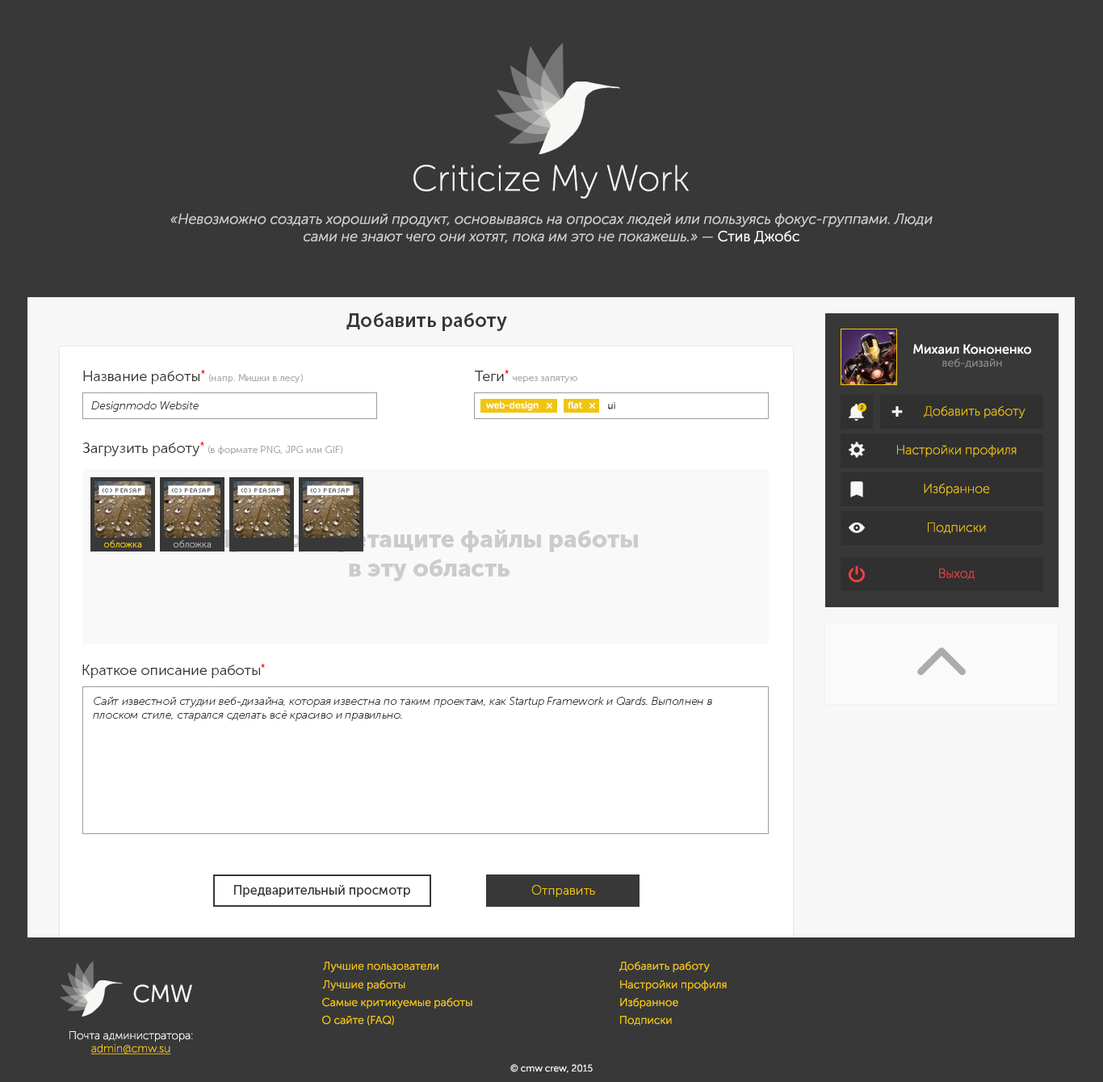
<style>
.page{position:relative;width:1103px;height:1082px;background:#383838}
.page>*{position:absolute;margin:0}
.t1{font:36.3px "MuseoSansCyrl-100";color:#f7f7f5}
.t2{font:14.5px "MuseoSansCyrl-300Italic";color:#cfcfcc}
.t3{font:14.5px "MuseoSansCyrl-300";color:#cfcfcc}
.t4{font:14.5px "MuseoSansCyrl-300";color:#ffffff}
.t5{font:19.4px "MuseoSansCyrl-700";color:#383838}
.t6{font:12.9px "MuseoSansCyrl-500";color:#ffffff}
.t7{font:11.3px "MuseoSansCyrl-300";color:#878787}
.t8{font:9.7px "MuseoSansCyrl-300";color:#adadad}
.t9{font:14.5px "MuseoSansCyrl-300";color:#383838}
.t10{font:14.5px "MuseoSansCyrl-300";color:#ff0000}
.t11{font:11.3px "MuseoSansCyrl-100Italic";color:#383838}
.t12{font:9.7px "MuseoSansCyrl-500";color:#ffffff}
.t13{font:9.7px "MuseoSansCyrl-500";color:#383838}
.t14{font:5.6px "MuseoSansCyrl-500";color:#383838}
.t15{font:17.8px "MuseoSansCyrl-900";color:#f7f7f7}
.t16{font:12.9px "MuseoSansCyrl-100";color:#f1c40f}
.t17{font:24.2px "MuseoSansCyrl-900";color:#cccccc}
.t18{font:9.7px "MuseoSansCyrl-100";color:#f1c40f}
.t19{font:9.7px "MuseoSansCyrl-100";color:#aaaaaa}
.t20{font:12.9px "MuseoSansCyrl-100";color:#ff4040}
.t21{font:12.9px "MuseoSansCyrl-500";color:#383838}
.t22{font:11.3px "MuseoSansCyrl-300";color:#f1c40f}
.t23{font:24.2px "MuseoSansCyrl-300";color:#f7f7f5}
.t24{font:11.3px "MuseoSansCyrl-100";color:#f7f7f7}
.t25{font:11.3px "MuseoSansCyrl-100";color:#f1c40f;text-decoration:underline}
.t26{font:9.7px "MuseoSansCyrl-300";color:#f7f7f5}
</style>
<div class="page">
<p class="t1" style="left:413px;top:165px;width:275px;height:34px">Criticize My Work</p>
<p class="t2" style="left:170px;top:213px;width:762px;height:31px;text-align:center">«Невозможно создать хороший продукт, основываясь на опросах людей или пользуясь фокус-группами. Люди сами не знают чего они хотят, пока им это не покажешь.» <span class="t3">— </span><span class="t4">Стив Джобс</span></p>
<p class="t5" style="left:346px;top:312px;width:161px;height:19px">Добавить работу</p>
<p class="t6" style="left:913px;top:344px;width:118px;height:10px">Михаил Кононенко</p>
<p class="t7" style="left:942px;top:358px;width:60px;height:10px">веб-дизайн</p>
<p class="t8" style="left:83px;top:370px;width:220px;height:14px"><span class="t9">Название работы</span><span class="t10">* </span>(напр. Мишки в лесу)</p>
<p class="t8" style="left:475px;top:370px;width:102px;height:13px"><span class="t9">Теги</span><span class="t10">* </span>через запятую</p>
<p class="t11" style="left:91px;top:401px;width:108px;height:11px">Designmodo Website</p>
<p class="t12" style="left:486px;top:401px;width:52px;height:10px">web-design</p>
<p class="t12" style="left:567px;top:401px;width:15px;height:7px">flat</p>
<p class="t13" style="left:608px;top:402px;width:7px;height:7px">ui</p>
<p class="t14" style="left:860px;top:404px;width:4px;height:5px">2</p>
<p class="t15" style="left:891px;top:406px;width:11px;height:10px">+</p>
<p class="t16" style="left:923px;top:405px;width:102px;height:13px">Добавить работу</p>
<p class="t8" style="left:82px;top:441px;width:260px;height:15px"><span class="t9">Загрузить работу</span><span class="t10">* </span>(в формате PNG, JPG или GIF)</p>
<p class="t16" style="left:897px;top:445px;width:119px;height:12px">Настройки профиля</p>
<p class="t16" style="left:923px;top:483px;width:67px;height:13px">Избранное</p>
<p class="t17" style="left:214px;top:529px;width:424px;height:52px;text-align:center">Просто перетащите файлы работы<br> в эту область</p>
<p class="t16" style="left:927px;top:522px;width:58px;height:12px">Подписки</p>
<p class="t18" style="left:103px;top:540px;width:39px;height:7px">обложка</p>
<p class="t19" style="left:173px;top:540px;width:38px;height:7px">обложка</p>
<p class="t20" style="left:939px;top:568px;width:35px;height:12px">Выход</p>
<p class="t9" style="left:82px;top:663px;width:183px;height:15px">Краткое описание работы<span class="t10">*</span></p>
<p class="t11" style="left:93px;top:697px;width:619px;height:24px">Сайт известной студии веб-дизайна, которая известна по таким проектам, как Startup Framework и Qards. Выполнен в плоском стиле, старался сделать всё красиво и правильно.</p>
<p class="t21" style="left:234px;top:885px;width:176px;height:12px">Предварительный просмотр</p>
<p class="t16" style="left:531px;top:885px;width:64px;height:12px">Отправить</p>
<p class="t22" style="left:323px;top:961px;width:115px;height:11px">Лучшие пользователи</p>
<p class="t22" style="left:619px;top:960px;width:90px;height:12px">Добавить работу</p>
<p class="t23" style="left:133px;top:984px;width:59px;height:18px">CMW</p>
<p class="t22" style="left:322px;top:979px;width:83px;height:11px">Лучшие работы</p>
<p class="t22" style="left:620px;top:980px;width:106px;height:10px">Настройки профиля</p>
<p class="t22" style="left:322px;top:997px;width:150px;height:11px">Самые критикуемые работы</p>
<p class="t22" style="left:620px;top:997px;width:58px;height:11px">Избранное</p>
<p class="t22" style="left:322px;top:1015px;width:72px;height:10px">О сайте (FAQ)</p>
<p class="t22" style="left:620px;top:1015px;width:52px;height:10px">Подписки</p>
<p class="t24" style="left:69px;top:1031px;width:124px;height:10px">Почта администратора:</p>
<p class="t25" style="left:90px;top:1044px;width:81px;height:10px">admin@cmw.su</p>
<p class="t26" style="left:510px;top:1064px;width:82px;height:9px">© cmw crew, 2015</p>
</div>
